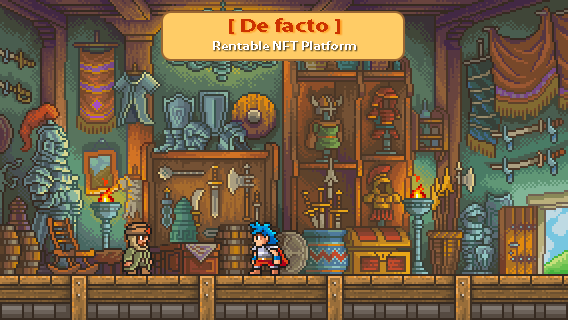
<style>
.page{position:relative;width:568px;height:320px}
.page>*{position:absolute;margin:0}
.t1{font:19.2px "MyriadPro-Bold";color:#cc3300;scale:1.25 1}
.t2{font:12px "MyriadPro-Bold";color:#ffffff;scale:1.25 1}
</style>
<div class="page">
<p class="t1" style="left:229px;top:18px;width:111px;height:16px">[ De facto ]</p>
<p class="t2" style="left:213px;top:41px;width:143px;height:9px">Rentable NFT Platform</p>
</div>
